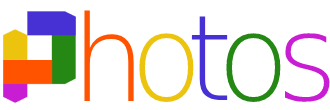
<style>
.page{position:relative;width:330px;height:110px;background:#ffffff}
.page>*{position:absolute;margin:0}
.t1{font:119px "DejaVuSans-ExtraLight";color:#ff5300}
.t2{font:119px "DejaVuSans-ExtraLight";color:#4831d4}
.t3{font:119px "DejaVuSans-ExtraLight";color:#ecc40d}
.t4{font:119px "DejaVuSans-ExtraLight";color:#258814}
.t5{font:119px "DejaVuSans-ExtraLight";color:#c81dd3}
</style>
<div class="page">
<p class="t1" style="left:84px;top:10px;width:50px;height:91px">h</p>
<p class="t2" style="left:191px;top:16px;width:37px;height:84px">t</p>
<p class="t3" style="left:139px;top:33px;width:55px;height:69px">o</p>
<p class="t4" style="left:226px;top:33px;width:55px;height:69px">o</p>
<p class="t5" style="left:284px;top:33px;width:46px;height:69px">s</p>
</div>
